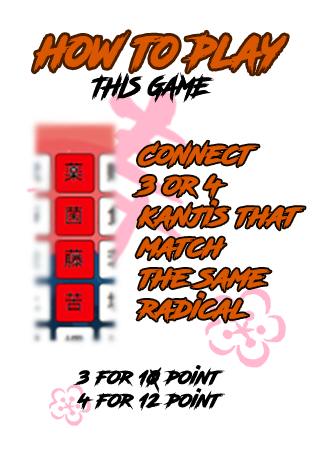
<style>
.page{position:relative;width:315px;height:450px;background:#ffffff}
.page>*{position:absolute;margin:0}
.t1{font:44.2px "RoadRage";color:#d95700;scale:0.87 1}
.t2{font:25.8px "RoadRage";color:#000000;scale:0.87 1}
.t3{font:25.7px "RoadRage";color:#d95700}
.t4{font:19.3px "RoadRage";color:#000000}
</style>
<div class="page">
<p class="t1" style="left:33px;top:32px;width:254px;height:42px">how to play</p>
<p class="t2" style="left:91px;top:72px;width:123px;height:31px">THIS GAME</p>
<p class="t3" style="left:133px;top:141px;width:172px;height:181px">Connect<br>3 or 4<br>kanjis that<br>match<br>the same<br>radical</p>
<p class="t4" style="left:73px;top:365px;width:152px;height:46px">3 for 10 point<br>4 for 12 point</p>
</div>
